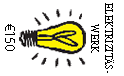
<style>
.page{position:relative;width:124px;height:76px;background:#ffffff}
.page>*{position:absolute;margin:0}
.t1{font:12px "AdobeDevanagari-Regular";color:#000000;scale:0.9 1}
.t2{font:14px "MyriadPro-Regular";color:#000000}
</style>
<div class="page">
<p class="t1" style="left:91px;top:3px;width:23px;height:70px;text-align:center;rotate:90deg">ELEKTRIZITÄS-<br>WERK</p>
<p class="t2" style="left:5px;top:24px;width:10px;height:27px;rotate:90deg">€150</p>
</div>
